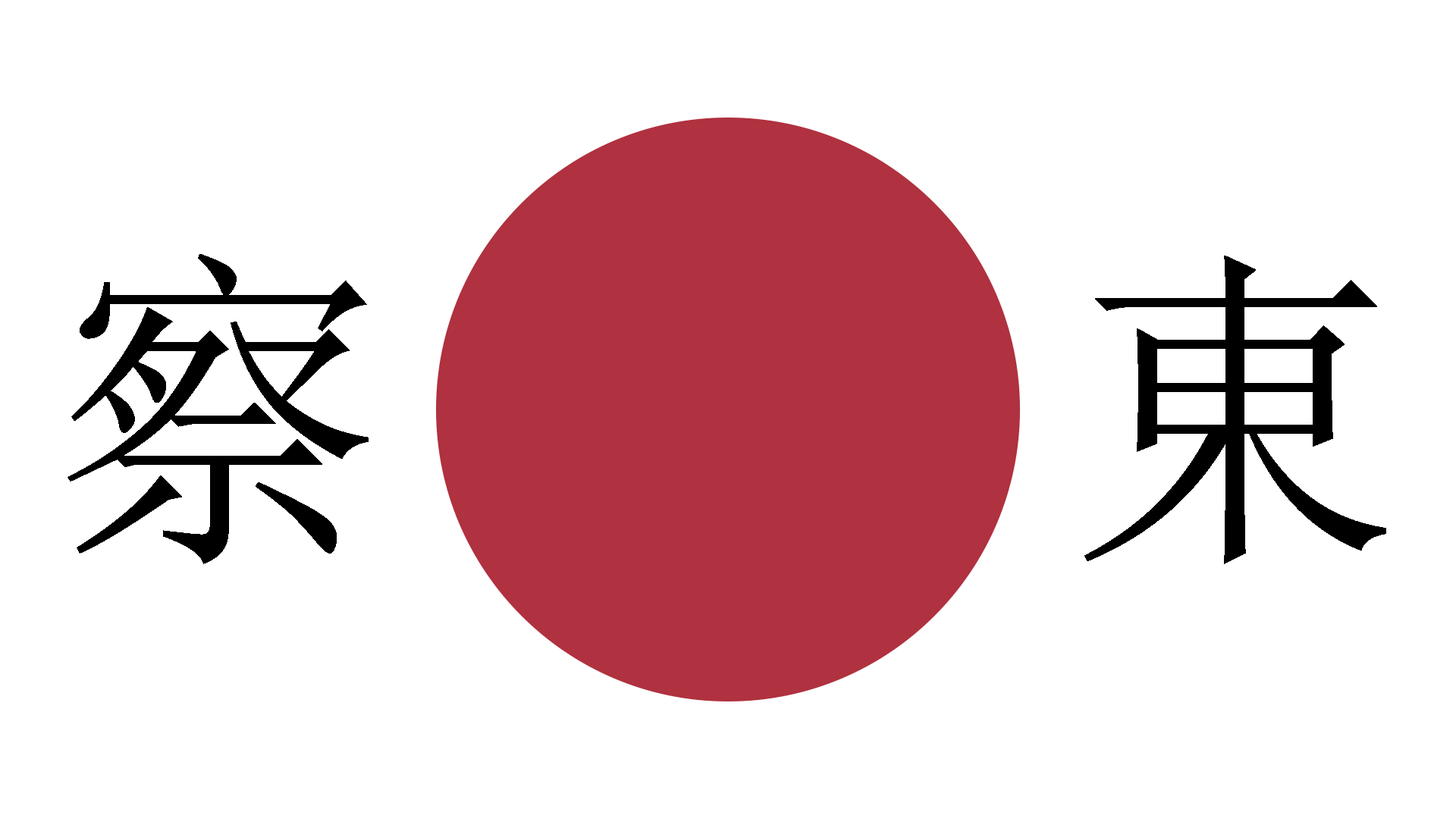
<style>
.page{position:relative;width:1456px;height:819px;background:#ffffff}
.page>*{position:absolute;margin:0}
.t1{font:333.4px "SimSun";letter-spacing:0.01em;color:#000000}
</style>
<div class="page">
<p class="t1" style="left:67px;top:254px;width:1319px;height:310px">察    東</p>
</div>
